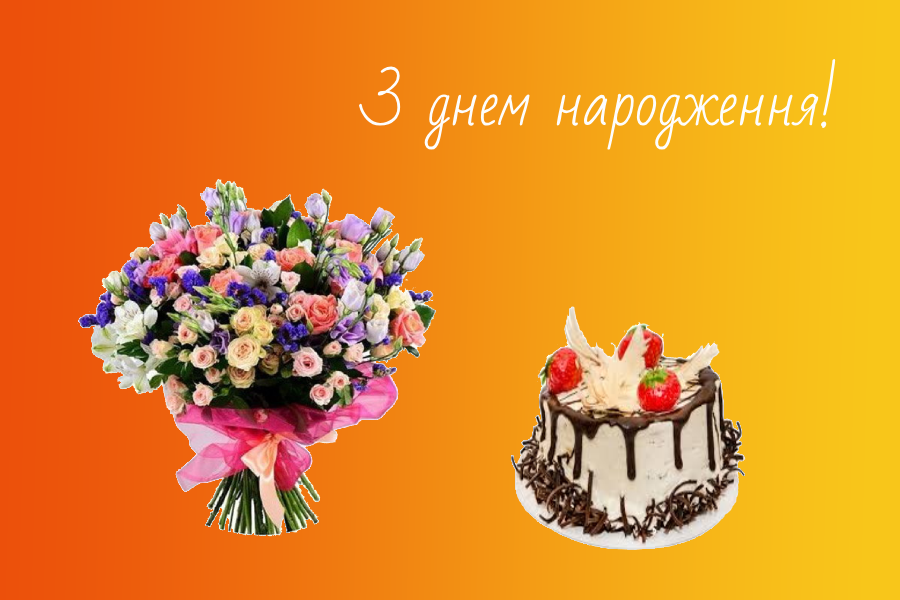
<style>
.page{position:relative;width:900px;height:600px}
.page>*{position:absolute;margin:0}
.t1{font:60px "BadScript-Regular";color:#fdfdfd}
</style>
<div class="page">
<p class="t1" style="left:359px;top:58px;width:477px;height:92px">З днем народження!</p>
</div>
